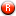
<style>
.page{position:relative;width:16px;height:16px}
.page>*{position:absolute;margin:0}
.t1{font:11px "Calibri";color:#ffffff}
</style>
<div class="page">
<p class="t1" style="left:6px;top:4px;width:4px;height:7px">R</p>
</div>
